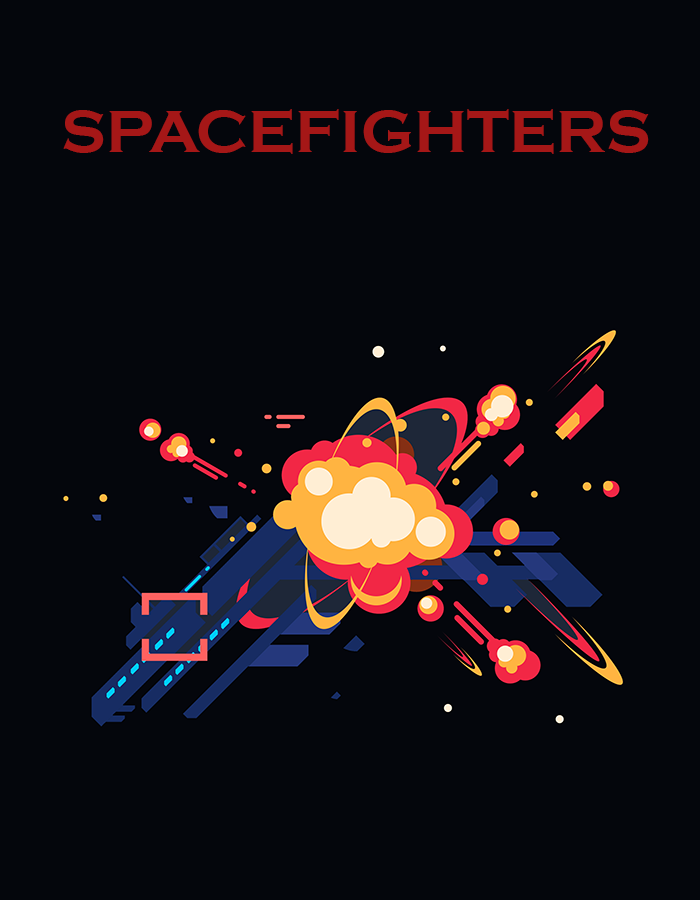
<style>
.page{position:relative;width:700px;height:900px;background:#04060c}
.page>*{position:absolute;margin:0}
.t1{font:62px "CopperplateGothic-Bold";color:#a51717}
</style>
<div class="page">
<p class="t1" style="left:63px;top:109px;width:586px;height:45px">SPACEFIGHTERS</p>
</div>
